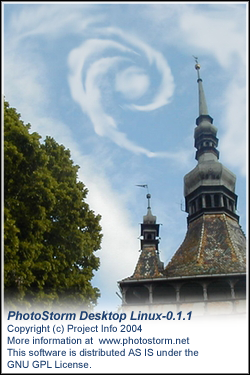
<style>
.page{position:relative;width:250px;height:375px}
.page>*{position:absolute;margin:0}
.t1{font:10px "ArialMT";color:#1e406f}
.t2{font:12px "Arial-BoldItalicMT";color:#1e406f}
</style>
<div class="page">
<p class="t1" style="left:7px;top:311px;width:192px;height:57px"><span class="t2">PhotoStorm Desktop Linux-0.1.1<br></span>Copyright (c) Project Info 2004<br>More information at  www.photostorm.net<br>This software is distributed AS IS under the <br>GNU GPL License.</p>
</div>
